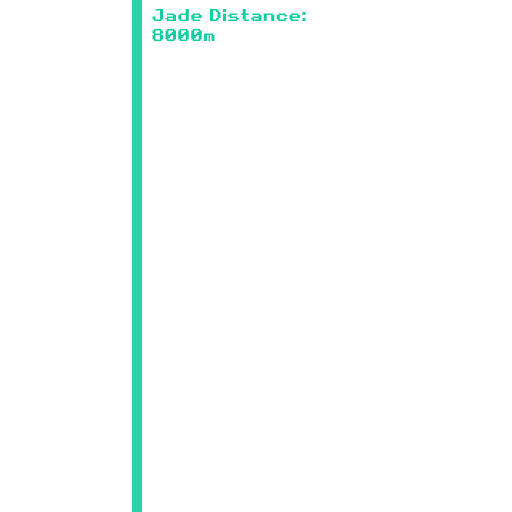
<style>
.page{position:relative;width:512px;height:512px;background:#ffffff}
.page>*{position:absolute;margin:0}
.t1{font:16.7px "RetroGaming";color:#13cea0}
</style>
<div class="page">
<p class="t1" style="left:152px;top:9px;width:154px;height:32px">Jade Distance:<br>8000m</p>
</div>
